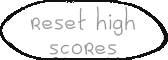
<style>
.page{position:relative;width:168px;height:60px;background:#ffffff}
.page>*{position:absolute;margin:0}
.t1{font:28.3px/25px "DoodleJump";color:#959595}
</style>
<div class="page">
<p class="t1" style="left:30px;top:6px;width:106px;height:49px;text-align:center">reset high<br>scores</p>
</div>
